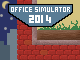
<style>
.page{position:relative;width:80px;height:60px}
.page>*{position:absolute;margin:0}
.t1{font:10px "wendy";color:#ffffff}
.t2{font:16px "wendy";color:#ffffff}
</style>
<div class="page">
<p class="t1" style="left:11px;top:7px;width:59px;height:16px;text-align:center">Office Simulator<br><span class="t2">2014</span></p>
</div>
